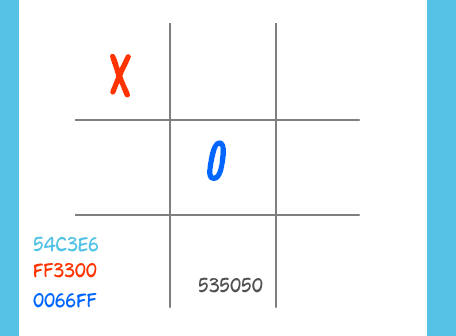
<style>
.page{position:relative;width:456px;height:336px;background:#ffffff}
.page>*{position:absolute;margin:0}
.t1{font:17.9px "Ames";color:#53c3e5}
.t2{font:17.9px "Ames";color:#ff3300}
.t3{font:17.9px "Ames";color:#535050}
.t4{font:17.9px "Ames";color:#0065ff}
</style>
<div class="page">
<p class="t1" style="left:34px;top:236px;width:64px;height:16px">54c3e6</p>
<p class="t2" style="left:33px;top:262px;width:64px;height:16px">ff3300</p>
<p class="t3" style="left:199px;top:277px;width:64px;height:16px">535050</p>
<p class="t4" style="left:33px;top:292px;width:64px;height:16px">0066ff</p>
</div>
